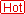
<style>
.page{position:relative;width:25px;height:14px;background:#ffffff}
.page>*{position:absolute;margin:0}
.t1{font:12px "ArialMT";color:#df0000}
</style>
<div class="page">
<p class="t1" style="left:3px;top:2px;width:19px;height:14px">Hot</p>
</div>
